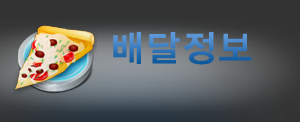
<style>
.page{position:relative;width:300px;height:122px}
.page>*{position:absolute;margin:0}
.t1{font:36px "YDIYGO140-KSCpc-EUC-H"}
</style>
<div class="page">
<p class="t1" style="left:113px;top:32px;width:139px;height:33px">배달정보</p>
</div>
